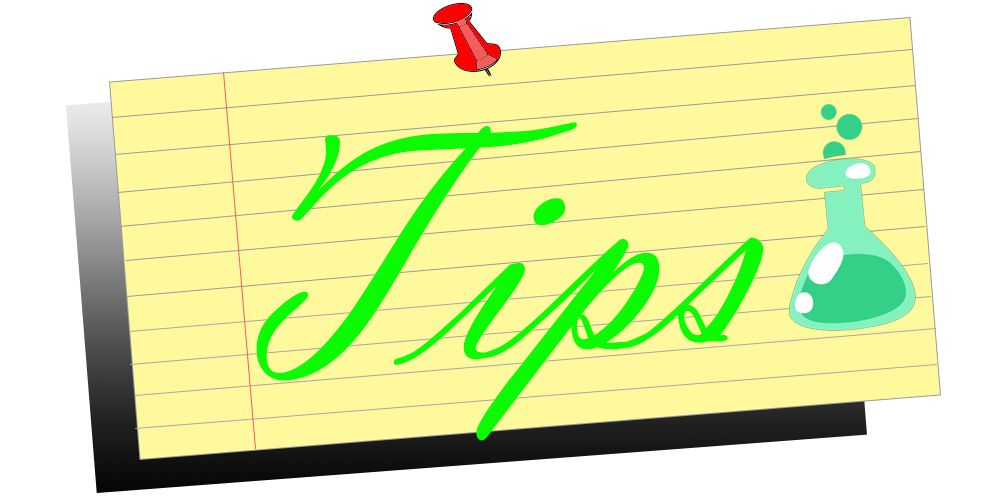
<style>
.page{position:relative;width:1000px;height:500px;background:#fff99d}
.page>*{position:absolute;margin:0}
.t1{font:350px "VladimirScript";color:#0bfb05}
</style>
<div class="page">
<p class="t1" style="left:256px;top:122px;width:508px;height:319px;rotate:-4deg">Tips</p>
</div>
